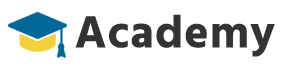
<style>
.page{position:relative;width:287px;height:70px;background:#ffffff}
.page>*{position:absolute;margin:0}
.t1{font:45.9px "HindMadurai-Bold";letter-spacing:0.025em;color:#333333}
</style>
<div class="page">
<p class="t1" style="left:75px;top:14px;width:200px;height:43px">Academy</p>
</div>
